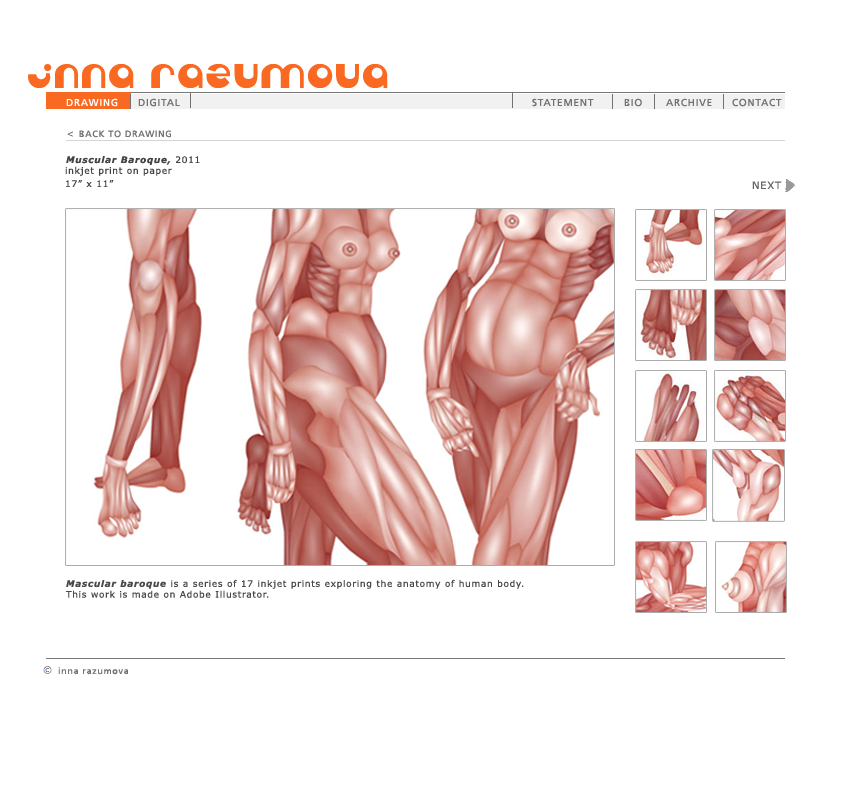
<style>
.page{position:relative;width:860px;height:800px;background:#ffffff}
.page>*{position:absolute;margin:0}
.t1{font:24px "Tabun";letter-spacing:0.075em;color:#f96922}
.t2{font:10px "Frutiger-Roman";letter-spacing:0.075em;color:#ffffff}
.t3{font:10px "Frutiger-Roman";letter-spacing:0.075em;color:#727272}
.t4{font:9px "Frutiger-Roman";letter-spacing:0.075em;color:#727272}
.t5{font:9px "Verdana-BoldItalic";letter-spacing:0.075em;color:#444444}
.t6{font:9px "Verdana";letter-spacing:0.075em;color:#444444}
.t7{font:10px "Verdana";letter-spacing:0.075em;color:#666666}
.t8{font:9px "Verdana";letter-spacing:0.075em;color:#494949}
.t9{font:9px "Verdana-BoldItalic";letter-spacing:0.075em;color:#494949}
</style>
<div class="page">
<p class="t1" style="left:28px;top:64px;width:360px;height:25px">inna razumova</p>
<p class="t2" style="left:66px;top:98px;width:52px;height:9px">DRAWING</p>
<p class="t3" style="left:138px;top:98px;width:42px;height:9px">DIGITAL</p>
<p class="t3" style="left:532px;top:98px;width:62px;height:9px">STATEMENT</p>
<p class="t3" style="left:624px;top:98px;width:18px;height:9px">BIO</p>
<p class="t3" style="left:666px;top:98px;width:46px;height:9px">ARCHIVE</p>
<p class="t3" style="left:732px;top:98px;width:50px;height:9px">CONTACT</p>
<p class="t4" style="left:79px;top:130px;width:92px;height:8px">BACK TO DRAWING</p>
<p class="t5" style="left:66px;top:156px;width:134px;height:9px">Muscular Baroque, <span class="t6">2011</span></p>
<p class="t6" style="left:65px;top:166px;width:107px;height:10px">inkjet print on paper</p>
<p class="t6" style="left:66px;top:180px;width:48px;height:7px">17” x 11”</p>
<p class="t7" style="left:752px;top:181px;width:30px;height:8px">NEXT</p>
<p class="t8" style="left:66px;top:579px;width:458px;height:19px"><span class="t9">Mascular baroque</span> is a series of 17 inkjet prints exploring the anatomy of human body. <br>This work is made on Adobe Illustrator.</p>
<p class="t4" style="left:58px;top:667px;width:70px;height:8px">inna razumova</p>
</div>
